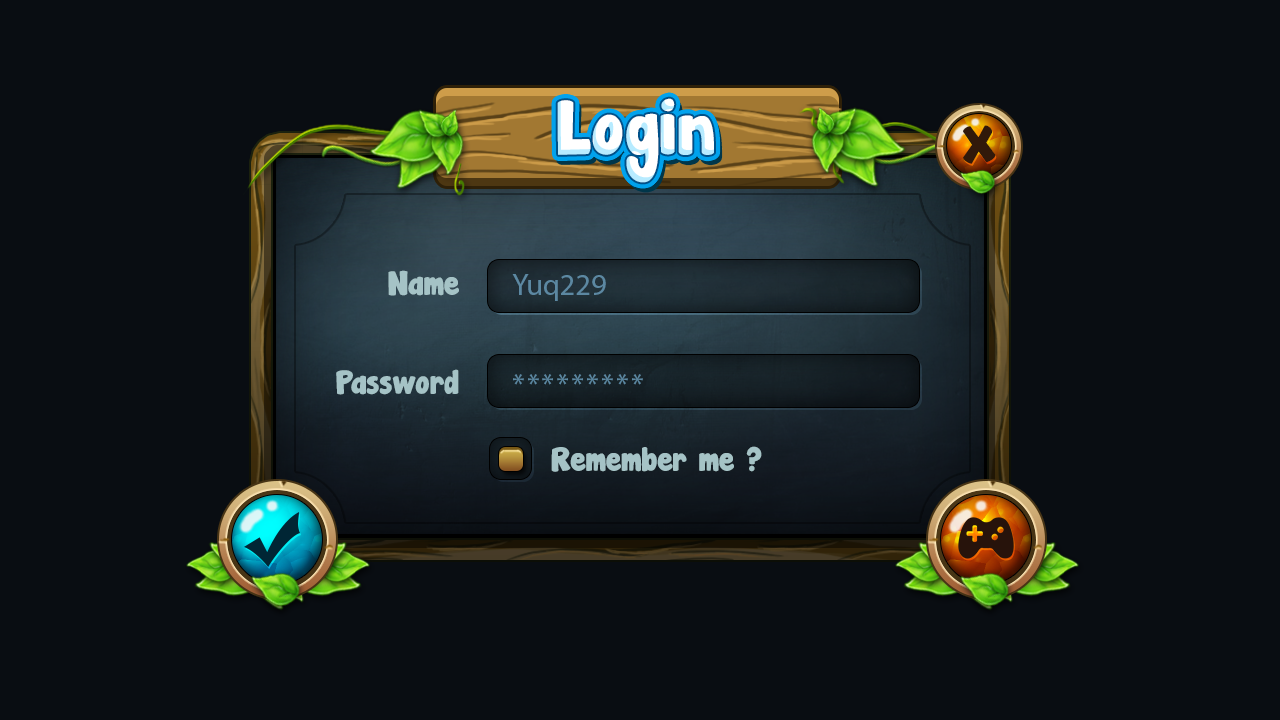
<style>
.page{position:relative;width:1280px;height:720px;background:#090d12}
.page>*{position:absolute;margin:0}
.t1{font:67.7px "JandaManateeSolid";color:#ffffff}
.t2{font:46.1px "JandaManateeSolid";color:#31190a}
.t3{font:30px "JandaManateeSolid";color:#a5c3c6}
.t4{font:30px "MyriadPro-Regular";color:#5c88a2}
.t5{font:30px "MyriadPro-Regular";letter-spacing:0.08em;color:#5c88a2}
</style>
<div class="page">
<p class="t1" style="left:557px;top:98px;width:157px;height:85px">Login</p>
<p class="t2" style="left:963px;top:125px;width:33px;height:39px">X</p>
<p class="t3" style="left:388px;top:270px;width:71px;height:26px">Name</p>
<p class="t4" style="left:512px;top:274px;width:94px;height:27px">Yuq229</p>
<p class="t3" style="left:336px;top:369px;width:123px;height:26px">Password</p>
<p class="t5" style="left:513px;top:374px;width:130px;height:11px">*********</p>
<p class="t3" style="left:551px;top:446px;width:211px;height:26px">Remember me ?</p>
</div>
